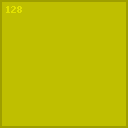
<style>
.page{position:relative;width:128px;height:128px;background:#bfbf00}
.page>*{position:absolute;margin:0}
.t1{font:9px "Verdana-Bold";letter-spacing:-0.025em;color:#e1e100;text-transform:uppercase}
</style>
<div class="page">
<p class="t1" style="left:6px;top:6px;width:16px;height:7px">128</p>
</div>
